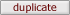
<style>
.page{position:relative;width:70px;height:15px;background:#e9e8e8}
.page>*{position:absolute;margin:0}
.t1{font:10px "Verdana";letter-spacing:-0.02em;color:#660000}
</style>
<div class="page">
<p class="t1" style="left:13px;top:3px;width:44px;height:10px">duplicate</p>
</div>
